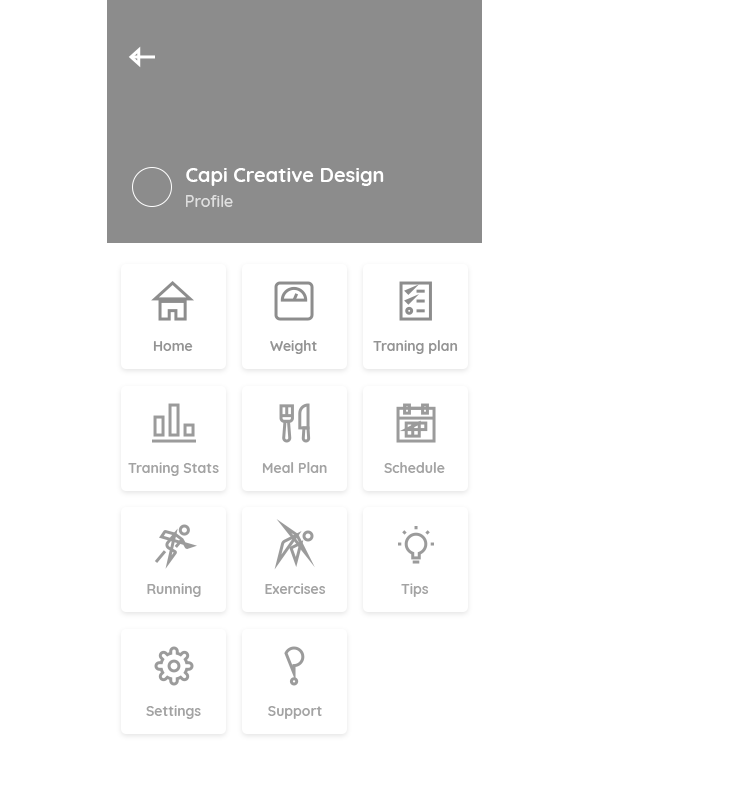
<style>
.page{position:relative;width:743px;height:812px;background:#ffffff}
.page>*{position:absolute;margin:0}
.t1{font:20px "Quicksand-Bold";color:#ffffff}
.t2{font:16px "Quicksand-Medium";color:#e0e0e0}
.t3{font:14px "Quicksand-Bold";color:#939393}
.t4{font:14px "Quicksand-Bold";color:#a3a3a3}
</style>
<div class="page">
<p class="t1" style="left:186px;top:168px;width:198px;height:18px">Capi Creative Design</p>
<p class="t2" style="left:186px;top:195px;width:47px;height:12px">Profile</p>
<p class="t3" style="left:153px;top:341px;width:40px;height:10px">Home</p>
<p class="t3" style="left:270px;top:340px;width:47px;height:14px">Weight</p>
<p class="t3" style="left:373px;top:340px;width:85px;height:14px">Traning plan</p>
<p class="t4" style="left:128px;top:462px;width:91px;height:14px">Traning Stats</p>
<p class="t4" style="left:262px;top:462px;width:65px;height:11px">Meal Plan</p>
<p class="t4" style="left:384px;top:462px;width:61px;height:11px">Schedule</p>
<p class="t4" style="left:147px;top:583px;width:54px;height:14px">Running</p>
<p class="t4" style="left:265px;top:583px;width:61px;height:11px">Exercises</p>
<p class="t4" style="left:401px;top:583px;width:28px;height:14px">Tips</p>
<p class="t4" style="left:146px;top:705px;width:55px;height:14px">Settings</p>
<p class="t4" style="left:268px;top:706px;width:54px;height:13px">Support</p>
</div>
